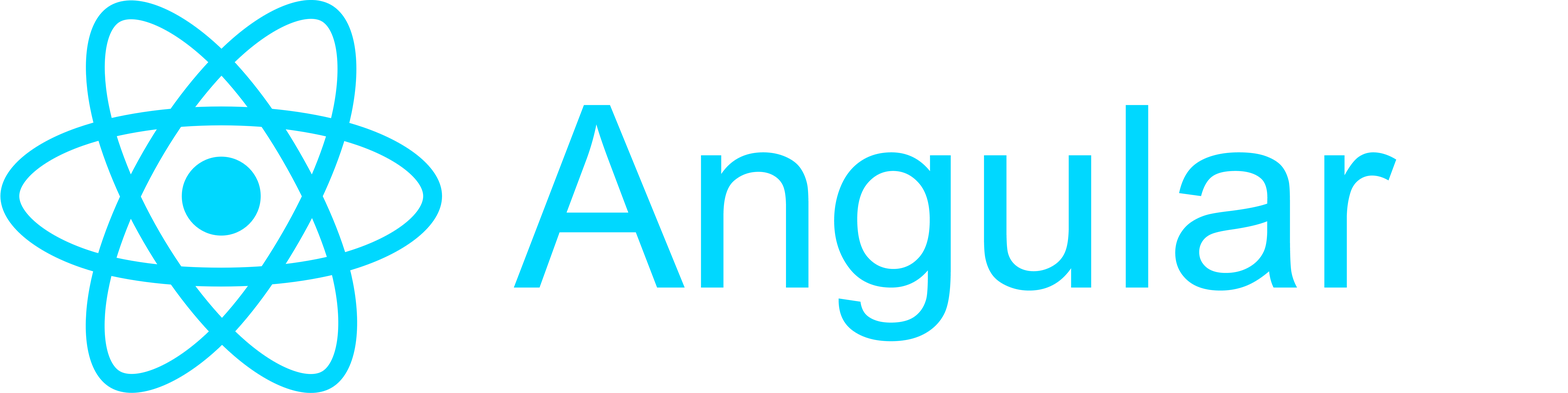
<style>
.page{position:relative;width:1568px;height:393px;background:#ffffff}
.page>*{position:absolute;margin:0}
.t1{font:254.8px "ArialMT";color:#00d8ff}
</style>
<div class="page">
<p class="t1" style="left:514px;top:105px;width:882px;height:236px">Angular</p>
</div>
